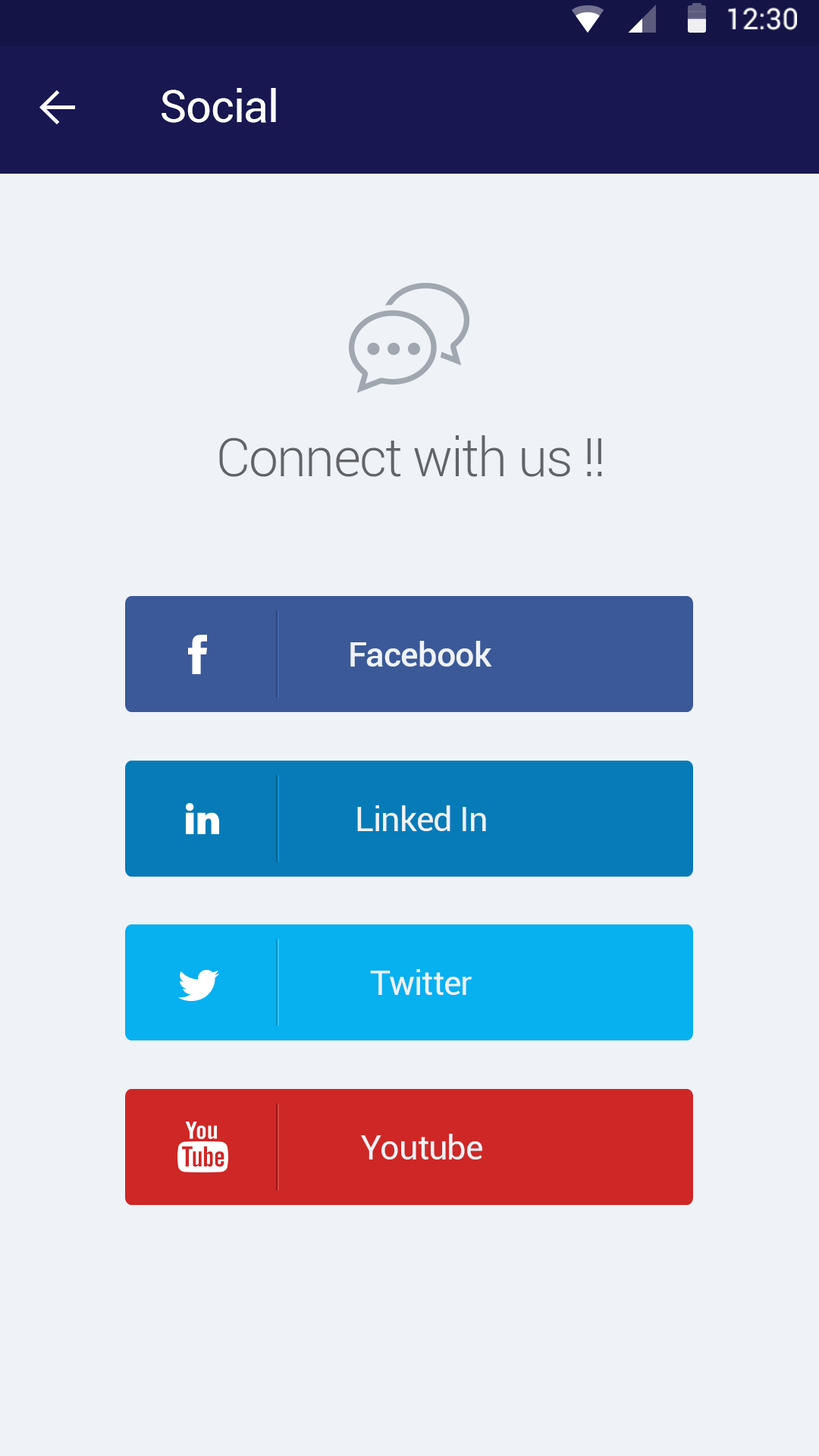
<style>
.page{position:relative;width:819px;height:1456px;background:#eff2f7}
.page>*{position:absolute;margin:0}
.t1{font:45.5px "Roboto-Regular";letter-spacing:-0.025em;color:#ffffff}
.t2{font:53.2px "Roboto-Light";letter-spacing:-0.025em;color:#616468}
.t3{font:34.4px "Roboto-Medium";letter-spacing:-0.025em;color:#eff2f7}
.t4{font:34.4px "Roboto-Regular";letter-spacing:-0.025em;color:#eff2f7}
</style>
<div class="page">
<p class="t1" style="left:162px;top:88px;width:114px;height:35px">Social</p>
<p class="t2" style="left:219px;top:435px;width:383px;height:42px">Connect with us !!</p>
<p class="t3" style="left:350px;top:641px;width:142px;height:26px">Facebook</p>
<p class="t4" style="left:357px;top:805px;width:129px;height:26px">Linked In</p>
<p class="t4" style="left:370px;top:969px;width:102px;height:26px">Twitter</p>
<p class="t4" style="left:361px;top:1134px;width:121px;height:25px">Youtube</p>
</div>
